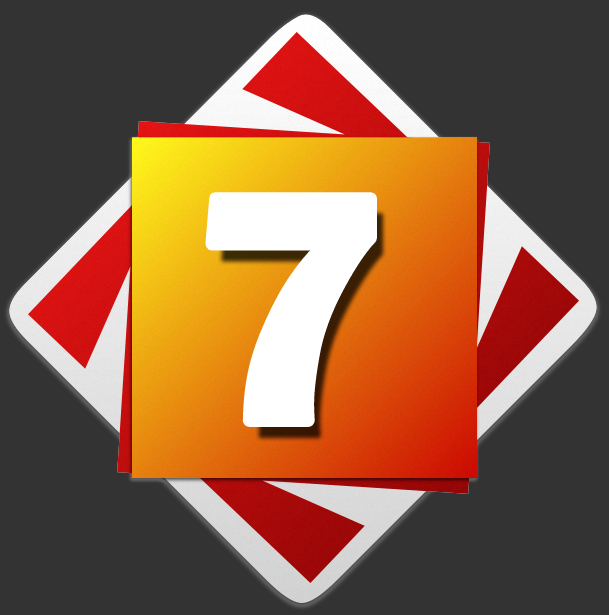
<style>
.page{position:relative;width:609px;height:615px;background:#333333}
.page>*{position:absolute;margin:0}
.t1{font:333.4px "FranklinGothic-Demi";color:#ffffff;font-weight:bold}
</style>
<div class="page">
<p class="t1" style="left:210px;top:197px;width:162px;height:225px">7</p>
</div>
